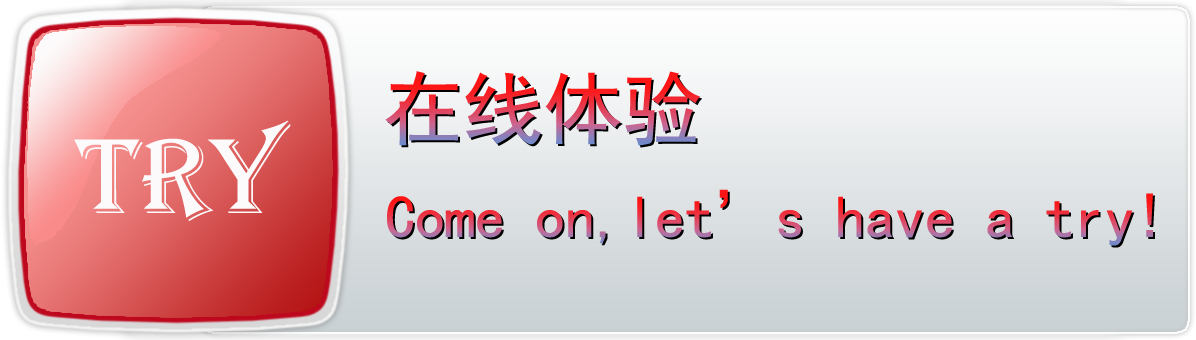
<style>
.page{position:relative;width:1196px;height:340px}
.page>*{position:absolute;margin:0}
.t1{font:80px "SimHei"}
.t2{font:110px "Algerian";color:#fcfafa}
.t3{font:60px "SimHei"}
</style>
<div class="page">
<p class="t1" style="left:385px;top:71px;width:315px;height:75px">在线体验</p>
<p class="t2" style="left:74px;top:120px;width:217px;height:101px">Try</p>
<p class="t3" style="left:387px;top:189px;width:766px;height:57px">Come on,let’s have a try!</p>
</div>
